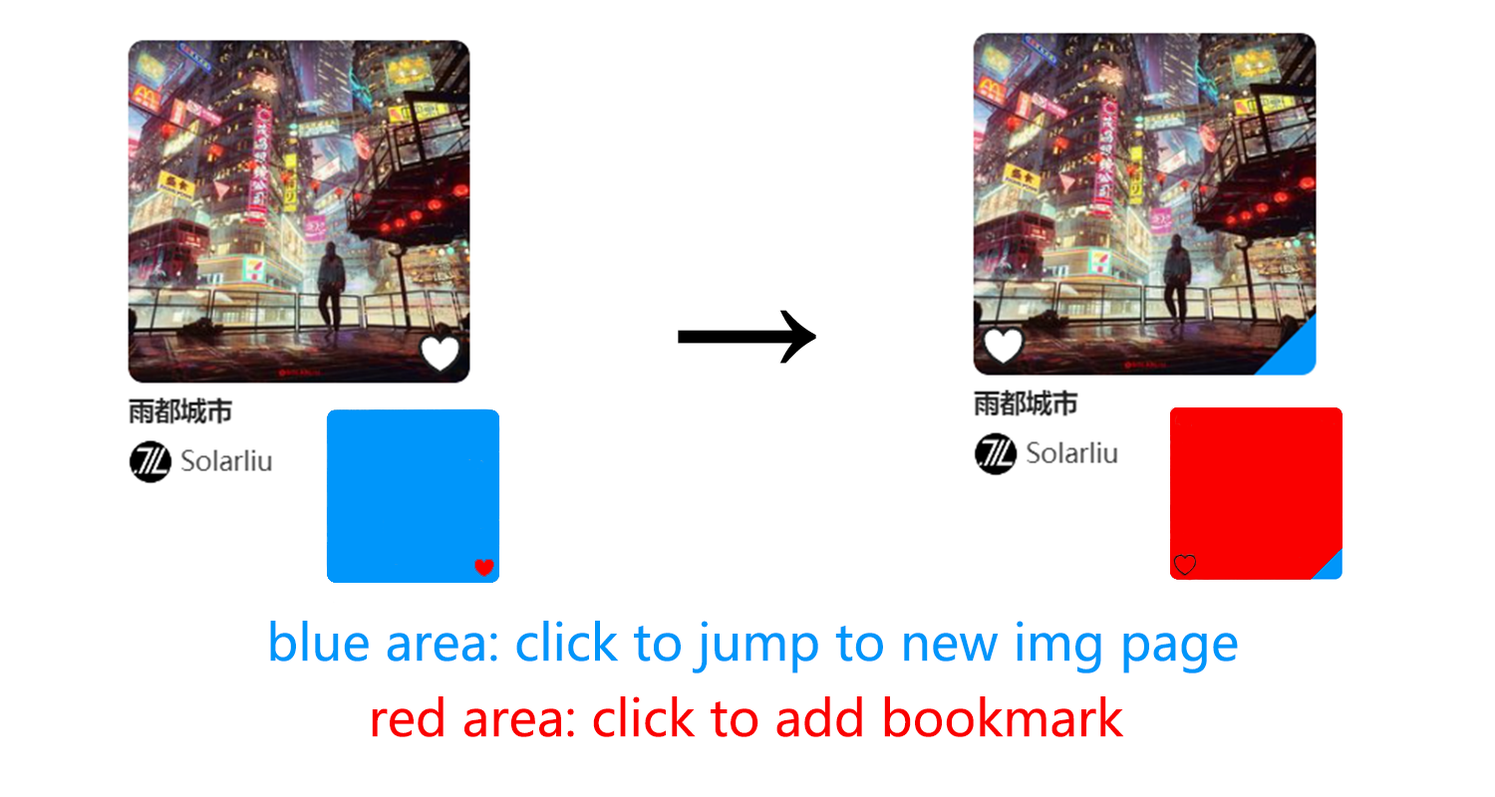
<style>
.page{position:relative;width:1495px;height:797px;background:#ffffff}
.page>*{position:absolute;margin:0}
.t1{font:149.5px "MicrosoftYaHei";color:#000000}
.t2{font:49.8px "MicrosoftYaHei";color:#0096fa}
.t3{font:49.8px "MicrosoftYaHei";color:#fa0000}
</style>
<div class="page">
<p class="t1" style="left:678px;top:310px;width:138px;height:54px">→</p>
<p class="t2" style="left:270px;top:621px;width:968px;height:53px">blue area: click to jump to new img page</p>
<p class="t3" style="left:372px;top:697px;width:752px;height:41px">red area: click to add bookmark</p>
</div>
